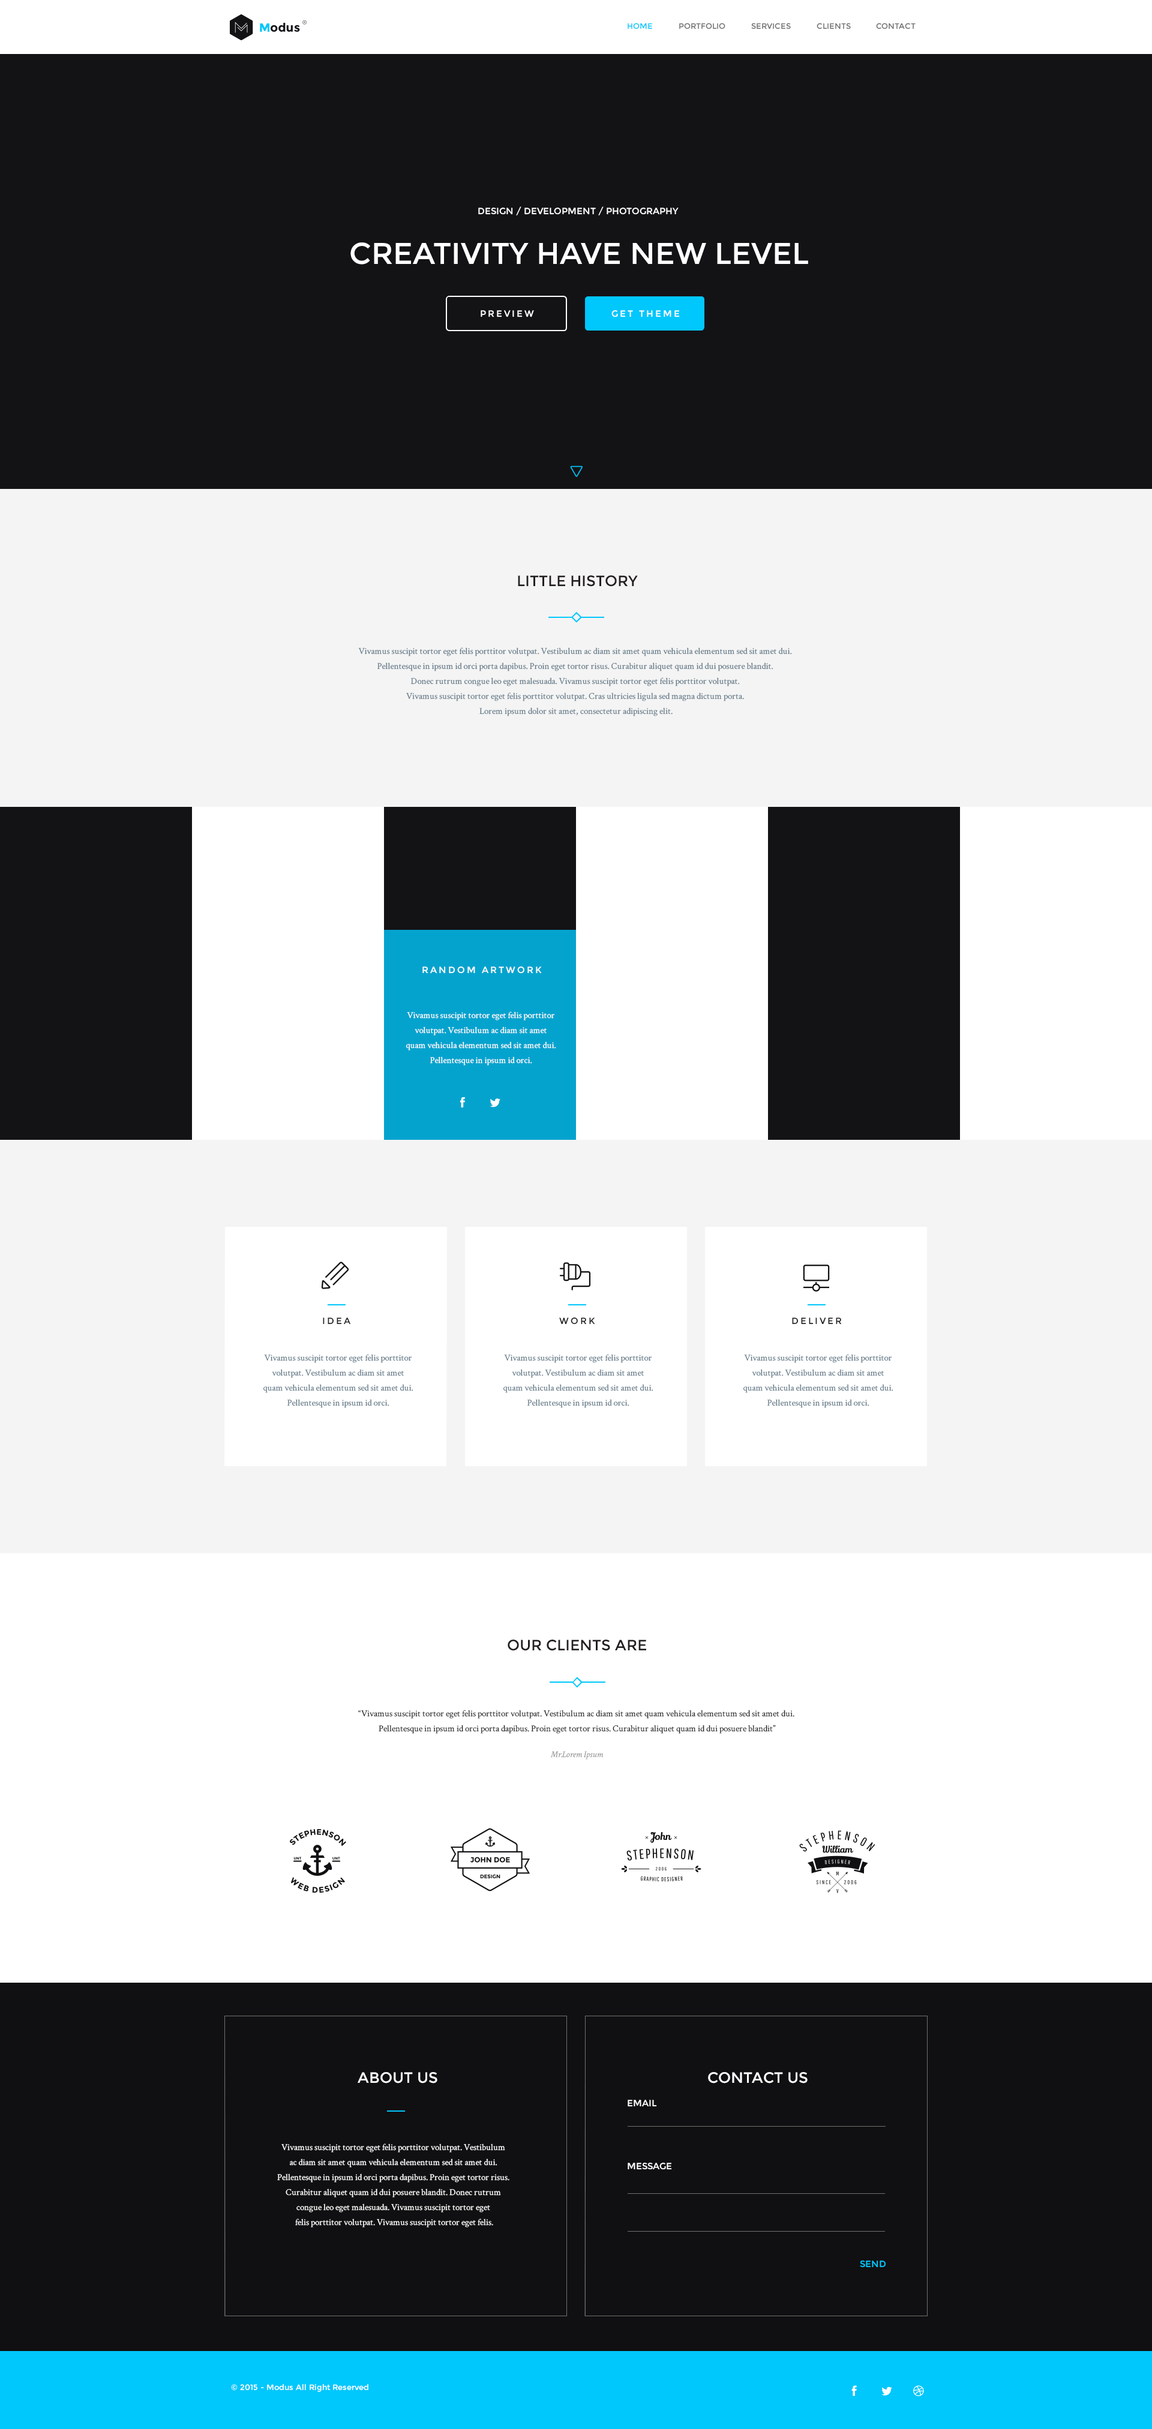
<style>
.page{position:relative;width:1152px;height:2429px;background:#ffffff}
.page>*{position:absolute;margin:0}
.t1{font:7.8px "Montserrat-Regular";color:#00c7fc}
.t2{font:7.8px "Montserrat-Regular";color:#707070}
.t3{font:9px "Montserrat-Regular";color:#ffffff}
.t4{font:30px "Montserrat-Regular";color:#ffffff}
.t5{font:9px "Montserrat-Regular";letter-spacing:0.2em;color:#ffffff}
.t6{font:15px "Montserrat-Regular";color:#231f20}
.t7{font:9px/15px "CrimsonText-Roman";color:#637988}
.t8{font:9px/15px "CrimsonText-Roman";color:#ffffff}
.t9{font:9px "Montserrat-Regular";letter-spacing:0.2em;color:#231f20}
.t10{font:9px/15px "CrimsonText-Roman";color:#231f20}
.t11{font:9px "CrimsonText-Italic";color:#999999}
.t12{font:15px "Montserrat-Regular";color:#ffffff}
.t13{font:9px "Montserrat-Regular";color:#00c7fc}
.t14{font:7.8px "Montserrat-Regular";color:#ffffff}
</style>
<div class="page">
<p class="t1" style="left:628px;top:23px;width:24px;height:6px">HOME</p>
<p class="t2" style="left:679px;top:23px;width:46px;height:6px">PORTFOLIO</p>
<p class="t2" style="left:751px;top:23px;width:40px;height:6px">SERVICES</p>
<p class="t2" style="left:817px;top:23px;width:34px;height:6px">CLIENTS</p>
<p class="t2" style="left:876px;top:23px;width:40px;height:6px">CONTACT</p>
<p class="t3" style="left:478px;top:206px;width:201px;height:9px">DESIGN / DEVELOPMENT / PHOTOGRAPHY</p>
<p class="t4" style="left:350px;top:242px;width:458px;height:23px">CREATIVITY HAVE NEW LEVEL</p>
<p class="t5" style="left:481px;top:310px;width:53px;height:7px">PREVIEW</p>
<p class="t5" style="left:611px;top:310px;width:69px;height:7px">GET THEME</p>
<p class="t6" style="left:518px;top:575px;width:120px;height:12px">LITTLE HISTORY</p>
<p class="t7" style="left:358px;top:647px;width:434px;height:69px;text-align:center">Vivamus suscipit tortor eget felis porttitor volutpat. Vestibulum ac diam sit amet quam vehicula elementum sed sit amet dui. <br>Pellentesque in ipsum id orci porta dapibus. Proin eget tortor risus. Curabitur aliquet quam id dui posuere blandit. <br>Donec rutrum congue leo eget malesuada. Vivamus suscipit tortor eget felis porttitor volutpat. <br>Vivamus suscipit tortor eget felis porttitor volutpat. Cras ultricies ligula sed magna dictum porta. <br>Lorem ipsum dolor sit amet, consectetur adipiscing elit.</p>
<p class="t5" style="left:422px;top:967px;width:120px;height:7px">RANDOM ARTWORK</p>
<p class="t8" style="left:406px;top:1012px;width:150px;height:54px;text-align:center">Vivamus suscipit tortor eget felis porttitor <br>volutpat. Vestibulum ac diam sit amet <br>quam vehicula elementum sed sit amet dui. <br>Pellentesque in ipsum id orci.</p>
<p class="t9" style="left:323px;top:1318px;width:28px;height:7px">IDEA</p>
<p class="t9" style="left:559px;top:1318px;width:36px;height:7px">WORK</p>
<p class="t9" style="left:792px;top:1318px;width:50px;height:7px">DELIVER</p>
<p class="t7" style="left:263px;top:1354px;width:150px;height:54px;text-align:center">Vivamus suscipit tortor eget felis porttitor <br>volutpat. Vestibulum ac diam sit amet <br>quam vehicula elementum sed sit amet dui. <br>Pellentesque in ipsum id orci.</p>
<p class="t7" style="left:503px;top:1354px;width:150px;height:54px;text-align:center">Vivamus suscipit tortor eget felis porttitor <br>volutpat. Vestibulum ac diam sit amet <br>quam vehicula elementum sed sit amet dui. <br>Pellentesque in ipsum id orci.</p>
<p class="t7" style="left:743px;top:1354px;width:150px;height:54px;text-align:center">Vivamus suscipit tortor eget felis porttitor <br>volutpat. Vestibulum ac diam sit amet <br>quam vehicula elementum sed sit amet dui. <br>Pellentesque in ipsum id orci.</p>
<p class="t6" style="left:508px;top:1640px;width:138px;height:11px">OUR CLIENTS ARE</p>
<p class="t10" style="left:358px;top:1710px;width:436px;height:24px;text-align:center">“Vivamus suscipit tortor eget felis porttitor volutpat. Vestibulum ac diam sit amet quam vehicula elementum sed sit amet dui. <br>Pellentesque in ipsum id orci porta dapibus. Proin eget tortor risus. Curabitur aliquet quam id dui posuere blandit”</p>
<p class="t11" style="left:550px;top:1751px;width:54px;height:9px">Mr.Lorem Ipsum</p>
<p class="t12" style="left:358px;top:2072px;width:79px;height:12px">ABOUT US</p>
<p class="t12" style="left:708px;top:2072px;width:100px;height:12px">CONTACT US</p>
<p class="t3" style="left:628px;top:2100px;width:29px;height:7px">EMAIL</p>
<p class="t8" style="left:277px;top:2144px;width:232px;height:84px;text-align:center">Vivamus suscipit tortor eget felis porttitor volutpat. Vestibulum <br>ac diam sit amet quam vehicula elementum sed sit amet dui. <br>Pellentesque in ipsum id orci porta dapibus. Proin eget tortor risus. <br>Curabitur aliquet quam id dui posuere blandit. Donec rutrum <br>congue leo eget malesuada. Vivamus suscipit tortor eget <br>felis porttitor volutpat. Vivamus suscipit tortor eget felis.</p>
<p class="t3" style="left:628px;top:2163px;width:44px;height:7px">MESSAGE</p>
<p class="t13" style="left:860px;top:2261px;width:26px;height:7px">SEND</p>
<p class="t14" style="left:231px;top:2384px;width:137px;height:8px">© 2015 - Modus All Right Reserved</p>
</div>
